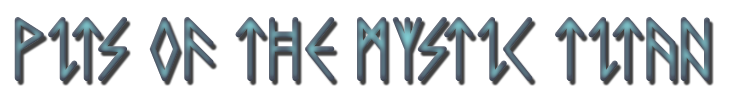
<style>
.page{position:relative;width:730px;height:100px;background:#ffffff}
.page>*{position:absolute;margin:0}
.t1{font:80px "ComicRunes"}
</style>
<div class="page">
<p class="t1" style="left:14px;top:17px;width:696px;height:64px">PITS OF THE MYSTIC TITAN</p>
</div>
